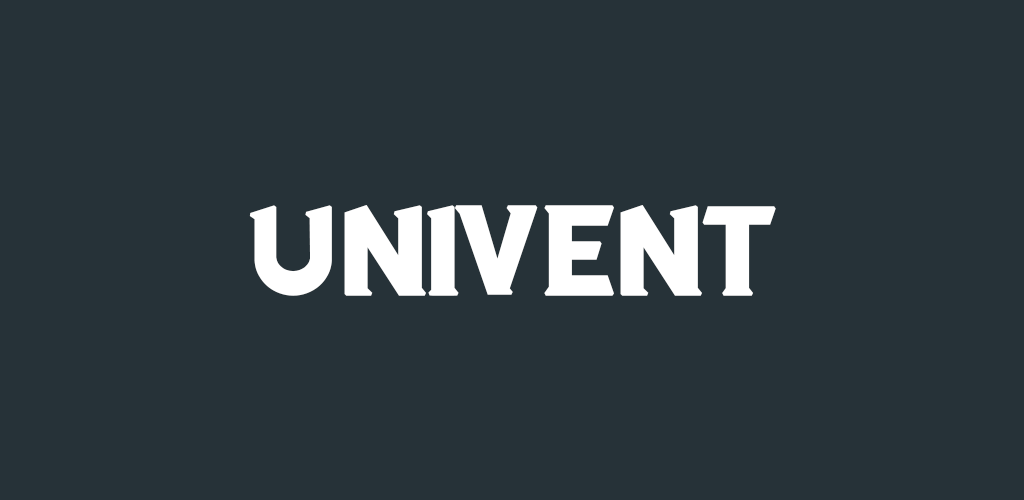
<style>
.page{position:relative;width:1024px;height:500px;background:#263238}
.page>*{position:absolute;margin:0}
.t1{font:122.9px "SEAGARDENS";color:#ffffff;font-weight:bold}
</style>
<div class="page">
<p class="t1" style="left:249px;top:205px;width:527px;height:91px">UNIVENT</p>
</div>
